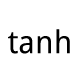
<style>
.page{position:relative;width:80px;height:80px;background:#ffffff}
.page>*{position:absolute;margin:0}
.t1{font:31.8px "DroidSans";color:#000000}
</style>
<div class="page">
<p class="t1" style="left:8px;top:29px;width:62px;height:25px">tanh</p>
</div>
